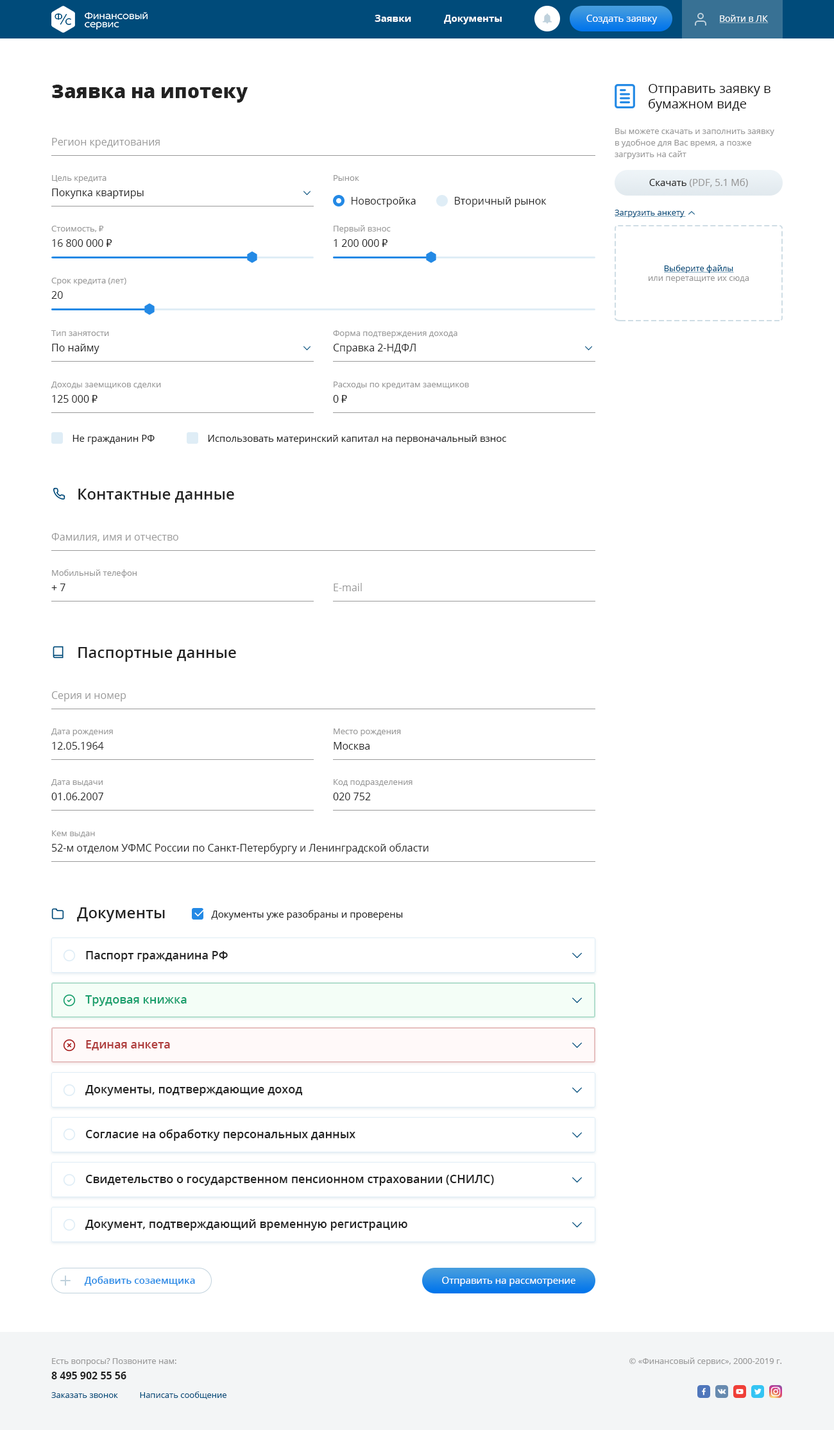
<style>
.page{position:relative;width:834px;height:1430px;background:#ffffff}
.page>*{position:absolute;margin:0}
.t1{font:9.6px "OpenSans-Bold";color:#ffffff}
.t2{font:9.6px "OpenSans";color:#ffffff}
.t3{font:9px "OpenSans";color:#ffffff}
.t4{font:19.2px "OpenSans-Extrabold";color:#222222}
.t5{font:12.8px/15.4px "OpenSans";color:#111111}
.t6{font:10.3px "OpenSans";color:#999999}
.t7{font:8.3px "OpenSans";color:#999999}
.t8{font:8.3px/11.5px "OpenSans";color:#999999}
.t9{font:10.3px/15.4px "OpenSans";color:#222222}
.t10{font:9.6px "OpenSans";color:#999999}
.t11{font:9.6px "OpenSans";color:#222222}
.t12{font:10.3px "OpenSans";color:#222222}
.t13{font:8.3px "OpenSans";color:#004b7a}
.t14{font:8.3px "Tahoma";color:#999999}
.t15{font:10.3px/15.4px "Tahoma";color:#222222}
.t16{font:15.4px "OpenSans-Semibold";color:#222222}
.t17{font:11.5px "OpenSans-Semibold";color:#222222}
.t18{font:11.5px "OpenSans-Semibold";color:#189f6c}
.t19{font:11.5px "OpenSans-Semibold";color:#ae3a3a}
.t20{font:9.6px "OpenSans-Semibold";color:#2389e5}
.t21{font:8.3px/15.4px "OpenSans";color:#999999}
.t22{font:10.3px/15.4px "OpenSans-Bold";color:#222222}
</style>
<div class="page">
<p class="t1" style="left:375px;top:15px;width:127px;height:9px">Заявки             Документы</p>
<p class="t2" style="left:586px;top:15px;width:71px;height:9px">Создать заявку</p>
<p class="t3" style="left:720px;top:15px;width:48px;height:7px">Войти в ЛК</p>
<p class="t4" style="left:52px;top:85px;width:196px;height:18px">Заявка на ипотеку</p>
<p class="t5" style="left:648px;top:84px;width:122px;height:28px">Отправить заявку в бумажном виде</p>
<p class="t6" style="left:52px;top:138px;width:108px;height:10px"><span class="t7"> <br></span>Регион кредитования</p>
<p class="t8" style="left:614px;top:128px;width:160px;height:31px">Вы можете скачать и заполнить заявку <br>в удобное для Вас время, а позже загрузить на сайт</p>
<p class="t9" style="left:52px;top:175px;width:92px;height:24px"><span class="t7">Цель кредита<br></span>Покупка квартиры</p>
<p class="t7" style="left:334px;top:175px;width:25px;height:6px">Рынок</p>
<p class="t10" style="left:649px;top:178px;width:99px;height:9px"><span class="t11">Скачать</span> (PDF, 5.1 Мб)</p>
<p class="t12" style="left:351px;top:197px;width:65px;height:10px">Новостройка</p>
<p class="t12" style="left:455px;top:197px;width:91px;height:10px">Вторичный рынок</p>
<p class="t13" style="left:614px;top:210px;width:70px;height:7px">Загрузить анкету</p>
<p class="t7" style="left:51px;top:226px;width:61px;height:21px">Стоимость, <span class="t14">₽<br></span><span class="t9">16 800 000 </span><span class="t15">₽</span></p>
<p class="t7" style="left:334px;top:225px;width:57px;height:22px">Первый взнос <br><span class="t9">1 200 000 </span><span class="t15">₽</span></p>
<p class="t7" style="left:648px;top:265px;width:101px;height:18px;text-align:center"><span class="t13">Выберите файлы <br></span>или перетащите их сюда</p>
<p class="t7" style="left:51px;top:278px;width:75px;height:21px">Срок кредита (лет)<br><span class="t9">20</span></p>
<p class="t7" style="left:51px;top:330px;width:58px;height:24px">Тип занятости<br><span class="t9">По найму</span></p>
<p class="t7" style="left:333px;top:330px;width:124px;height:24px">Форма подтверждения дохода<br><span class="t9">Справка 2-НДФЛ</span></p>
<p class="t7" style="left:51px;top:382px;width:110px;height:21px">Доходы заемщиков сделки<br><span class="t9">125 000 </span><span class="t15">₽</span></p>
<p class="t7" style="left:333px;top:382px;width:136px;height:21px">Расходы по кредитам заемщиков<br><span class="t9">0 </span><span class="t15">₽</span></p>
<p class="t11" style="left:72px;top:435px;width:83px;height:9px">Не гражданин РФ</p>
<p class="t11" style="left:208px;top:435px;width:298px;height:9px">Использовать материнский капитал на первоначальный взнос</p>
<p class="t16" style="left:78px;top:489px;width:156px;height:14px">Контактные данные</p>
<p class="t6" style="left:51px;top:533px;width:127px;height:9px"><span class="t7"> <br></span>Фамилия, имя и отчество</p>
<p class="t7" style="left:51px;top:570px;width:86px;height:21px">Мобильный телефон<br><span class="t9">+ 7</span></p>
<p class="t6" style="left:334px;top:583px;width:28px;height:8px"><span class="t7"> <br></span>E-mail</p>
<p class="t16" style="left:78px;top:647px;width:158px;height:15px">Паспортные данные</p>
<p class="t6" style="left:51px;top:691px;width:75px;height:11px"><span class="t7"> <br></span>Серия и номер</p>
<p class="t7" style="left:51px;top:729px;width:62px;height:21px">Дата рождения<br><span class="t9">12.05.1964</span></p>
<p class="t7" style="left:334px;top:729px;width:67px;height:21px">Место рождения<br><span class="t9">Москва</span></p>
<p class="t7" style="left:51px;top:779px;width:52px;height:21px">Дата выдачи<br><span class="t9">01.06.2007</span></p>
<p class="t7" style="left:333px;top:779px;width:79px;height:21px">Код подразделения<br><span class="t9">020 752</span></p>
<p class="t9" style="left:52px;top:831px;width:376px;height:23px"><span class="t7">Кем выдан<br></span>52-м отделом УФМС России по Санкт-Петербургу и Ленинградской области</p>
<p class="t16" style="left:77px;top:908px;width:88px;height:14px">Документы</p>
<p class="t11" style="left:211px;top:910px;width:192px;height:10px">Документы уже разобраны и проверены</p>
<p class="t17" style="left:86px;top:951px;width:142px;height:11px">Паспорт гражданина РФ</p>
<p class="t18" style="left:85px;top:995px;width:102px;height:11px">Трудовая книжка</p>
<p class="t19" style="left:86px;top:1040px;width:84px;height:11px">Единая анкета</p>
<p class="t17" style="left:85px;top:1085px;width:218px;height:11px">Документы, подтверждающие доход</p>
<p class="t17" style="left:86px;top:1129px;width:269px;height:12px">Согласие на обработку персональных данных</p>
<p class="t17" style="left:86px;top:1175px;width:408px;height:11px">Свидетельство о государственном пенсионном страховании (СНИЛС)</p>
<p class="t17" style="left:85px;top:1219px;width:322px;height:12px">Документ, подтверждающий временную регистрацию</p>
<p class="t20" style="left:84px;top:1276px;width:111px;height:10px">Добавить созаемщика</p>
<p class="t2" style="left:442px;top:1277px;width:133px;height:10px">Отправить на рассмотрение</p>
<p class="t21" style="left:51px;top:1358px;width:125px;height:22px">Есть вопросы? Позвоните нам:<br><span class="t22">8 495 902 55 56</span></p>
<p class="t7" style="left:629px;top:1358px;width:153px;height:8px">© «Финансовый сервис», 2000-2019 г.</p>
<p class="t13" style="left:51px;top:1392px;width:175px;height:7px">Заказать звонок          Написать сообщение</p>
</div>
